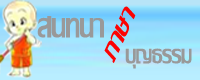
<style>
.page{position:relative;width:200px;height:80px}
.page>*{position:absolute;margin:0}
.t1{font:36.4px "LilyUPC";color:#fc0303;scale:1.15 1}
.t2{font:48px "LilyUPC";color:#999999;scale:0.86 1}
.t3{font:36px "LilyUPC";color:#999999;scale:0.86 1}
</style>
<div class="page">
<p class="t1" style="left:104px;top:6px;width:32px;height:57px;rotate:-66deg">ภาษา</p>
<p class="t2" style="left:37px;top:16px;width:67px;height:22px">สนทนา</p>
<p class="t3" style="left:125px;top:48px;width:67px;height:21px">บุญธรรม</p>
</div>
